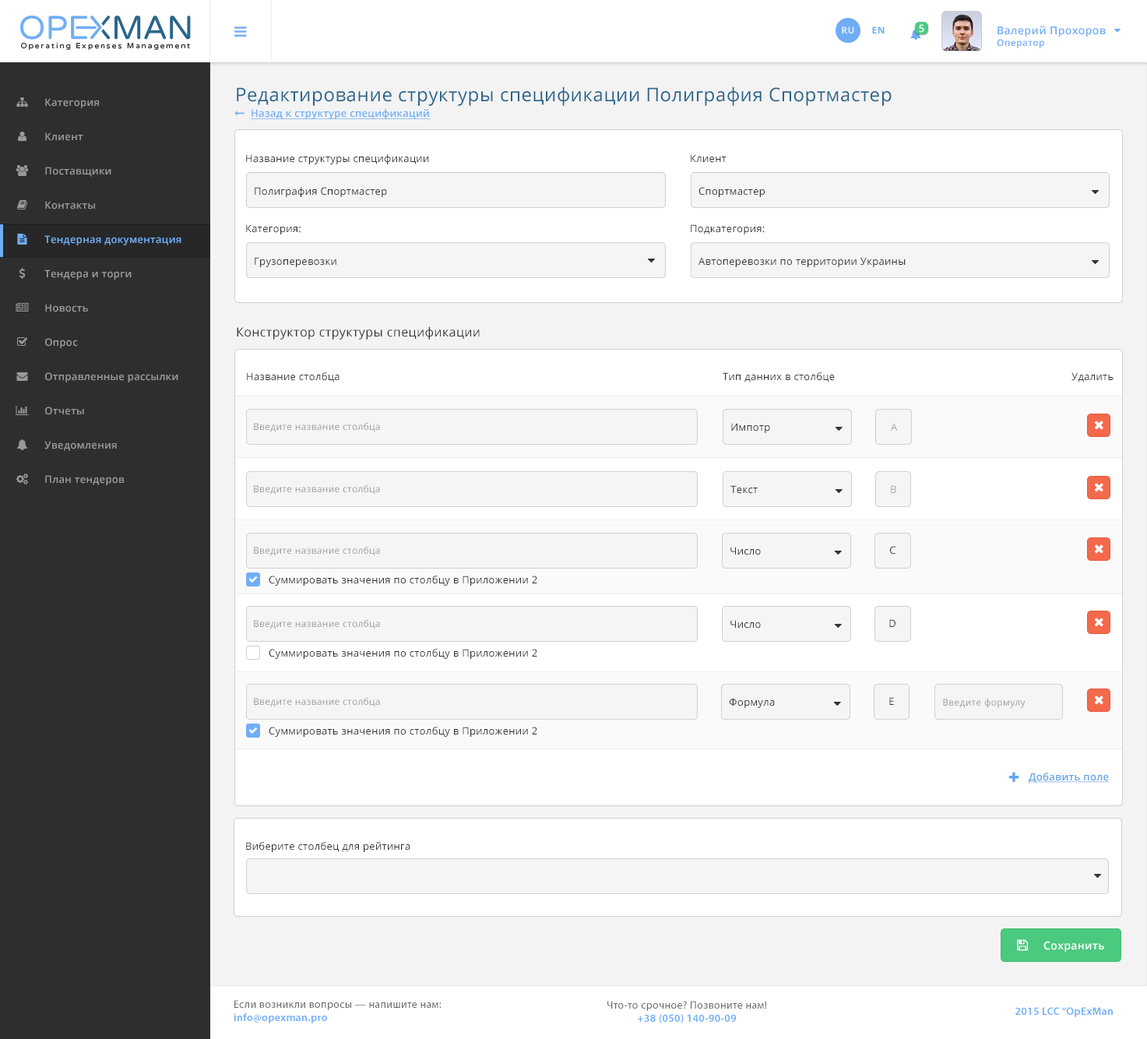
<style>
.page{position:relative;width:1147px;height:1039px;background:#ffffff}
.page>*{position:absolute;margin:0}
.t1{font:9.3px "OpenSans-Bold";letter-spacing:0.025em;color:#dbe8fc;text-transform:uppercase}
.t2{font:9.3px "OpenSans-Bold";letter-spacing:0.025em;color:#70adf5;text-transform:uppercase}
.t3{font:10.1px "OpenSans-Semibold";letter-spacing:0.025em;color:#ffffff}
.t4{font:10.9px "OpenSans-Semibold";letter-spacing:0.025em;color:#70adf5}
.t5{font:9.3px "OpenSans-Semibold";letter-spacing:0.025em;color:#70adf5}
.t6{font:18.7px "OpenSans";letter-spacing:0.025em;color:#29658b}
.t7{font:10.1px "OpenSans-Semibold";letter-spacing:0.025em;color:#999999}
.t8{font:10.1px "OpenSans-Semibold";letter-spacing:0.025em;color:#6faff8;text-decoration:underline}
.t9{font:10.1px "OpenSans";letter-spacing:0.025em;color:#333333}
.t10{font:10.1px "OpenSans-Semibold";letter-spacing:0.025em;color:#70adf5}
.t11{font:12.5px "OpenSans";letter-spacing:0.025em;color:#333333}
.t12{font:9.3px "OpenSans";letter-spacing:0.025em;color:#999999}
.t13{font:10.1px "OpenSans";letter-spacing:0.025em;color:#a6a6a6}
.t14{font:10.1px "OpenSans-Semibold";letter-spacing:0.025em;color:#62a3ed;text-decoration:underline}
.t15{font:10.9px "OpenSans-Semibold";letter-spacing:0.025em;color:#ffffff}
.t16{font:10.9px "MyriadPro-Regular";letter-spacing:0.025em;color:#696969}
.t17{font:10.9px "MyriadPro-Semibold";letter-spacing:0.025em;color:#6eaef8}
</style>
<div class="page">
<p class="t1" style="left:842px;top:26px;width:13px;height:7px">Ru</p>
<p class="t2" style="left:872px;top:26px;width:13px;height:7px">EN</p>
<p class="t3" style="left:919px;top:24px;width:6px;height:9px">5</p>
<p class="t4" style="left:997px;top:26px;width:109px;height:22px">Валерий Прохоров<br><span class="t5">Оператор</span></p>
<p class="t6" style="left:237px;top:86px;width:655px;height:20px">Редактирование cтруктуры спецификации Полиграфия Спортмастер</p>
<p class="t7" style="left:45px;top:98px;width:54px;height:10px">Категория</p>
<p class="t8" style="left:251px;top:109px;width:180px;height:10px">Назад к структуре спецификаций</p>
<p class="t7" style="left:45px;top:132px;width:38px;height:9px">Клиент</p>
<p class="t9" style="left:246px;top:154px;width:183px;height:10px">Название структуры спецификации</p>
<p class="t9" style="left:691px;top:154px;width:36px;height:9px">Клиент</p>
<p class="t7" style="left:45px;top:167px;width:66px;height:10px">Поставщики</p>
<p class="t9" style="left:255px;top:187px;width:132px;height:10px">Полиграфия Спортмастер</p>
<p class="t9" style="left:699px;top:187px;width:66px;height:10px">Спортмастер</p>
<p class="t7" style="left:45px;top:201px;width:50px;height:9px">Контакты</p>
<p class="t9" style="left:246px;top:224px;width:55px;height:10px">Категория:</p>
<p class="t9" style="left:691px;top:224px;width:74px;height:10px">Подкатегория:</p>
<p class="t10" style="left:44px;top:235px;width:138px;height:10px">Тендерная документация</p>
<p class="t9" style="left:255px;top:257px;width:82px;height:10px">Грузоперевозки</p>
<p class="t9" style="left:699px;top:257px;width:207px;height:10px">Автоперевозки по территории Украины</p>
<p class="t7" style="left:44px;top:270px;width:88px;height:10px">Тендера и торги</p>
<p class="t7" style="left:45px;top:304px;width:43px;height:8px">Новость</p>
<p class="t11" style="left:237px;top:326px;width:243px;height:14px">Конструктор структуры спецификации</p>
<p class="t7" style="left:45px;top:338px;width:33px;height:10px">Опрос</p>
<p class="t7" style="left:45px;top:372px;width:133px;height:10px">Отправленные рассылки</p>
<p class="t9" style="left:247px;top:372px;width:93px;height:10px">Название столбца</p>
<p class="t9" style="left:723px;top:372px;width:112px;height:10px">Тип данних в столбце</p>
<p class="t9" style="left:1072px;top:372px;width:42px;height:10px">Удалить</p>
<p class="t7" style="left:45px;top:407px;width:39px;height:8px">Отчеты</p>
<p class="t12" style="left:254px;top:423px;width:126px;height:9px">Введите название столбца</p>
<p class="t9" style="left:731px;top:423px;width:39px;height:10px">Импотр</p>
<p class="t13" style="left:891px;top:423px;width:7px;height:8px">A</p>
<p class="t7" style="left:44px;top:441px;width:73px;height:10px">Уведомления</p>
<p class="t7" style="left:45px;top:475px;width:80px;height:10px">План тендеров</p>
<p class="t12" style="left:254px;top:485px;width:126px;height:10px">Введите название столбца</p>
<p class="t9" style="left:731px;top:485px;width:27px;height:9px">Текст</p>
<p class="t13" style="left:891px;top:485px;width:6px;height:8px">B</p>
<p class="t12" style="left:254px;top:547px;width:126px;height:9px">Введите название столбца</p>
<p class="t9" style="left:731px;top:547px;width:30px;height:8px">Число</p>
<p class="t9" style="left:890px;top:546px;width:6px;height:9px">C</p>
<p class="t9" style="left:269px;top:576px;width:269px;height:10px">Суммировать значения по столбцу в Приложении 2</p>
<p class="t12" style="left:254px;top:620px;width:126px;height:9px">Введите название столбца</p>
<p class="t9" style="left:731px;top:620px;width:30px;height:9px">Число</p>
<p class="t9" style="left:890px;top:619px;width:6px;height:8px">D</p>
<p class="t9" style="left:269px;top:649px;width:269px;height:10px">Суммировать значения по столбцу в Приложении 2</p>
<p class="t12" style="left:254px;top:698px;width:126px;height:9px">Введите название столбца</p>
<p class="t9" style="left:730px;top:698px;width:45px;height:10px">Формула</p>
<p class="t9" style="left:890px;top:697px;width:4px;height:8px">E</p>
<p class="t12" style="left:943px;top:699px;width:83px;height:9px">Введите формулу</p>
<p class="t9" style="left:269px;top:727px;width:269px;height:10px">Суммировать значения по столбцу в Приложении 2</p>
<p class="t14" style="left:1029px;top:773px;width:81px;height:10px">Добавить поле</p>
<p class="t9" style="left:246px;top:842px;width:165px;height:10px">Виберите столбец для рейтинга</p>
<p class="t15" style="left:1044px;top:941px;width:61px;height:12px">Сохранить</p>
<p class="t16" style="left:234px;top:1000px;width:208px;height:24px">Если возникли вопросы — напишите нам:<br><span class="t17">info@opexman.pro</span></p>
<p class="t16" style="left:608px;top:1001px;width:159px;height:23px;text-align:center">Что-то срочное? Позвоните нам!<br><span class="t17">+38 (050) 140-90-09</span></p>
<p class="t17" style="left:1016px;top:1007px;width:97px;height:10px">2015 LCC “OpExMan</p>
</div>
